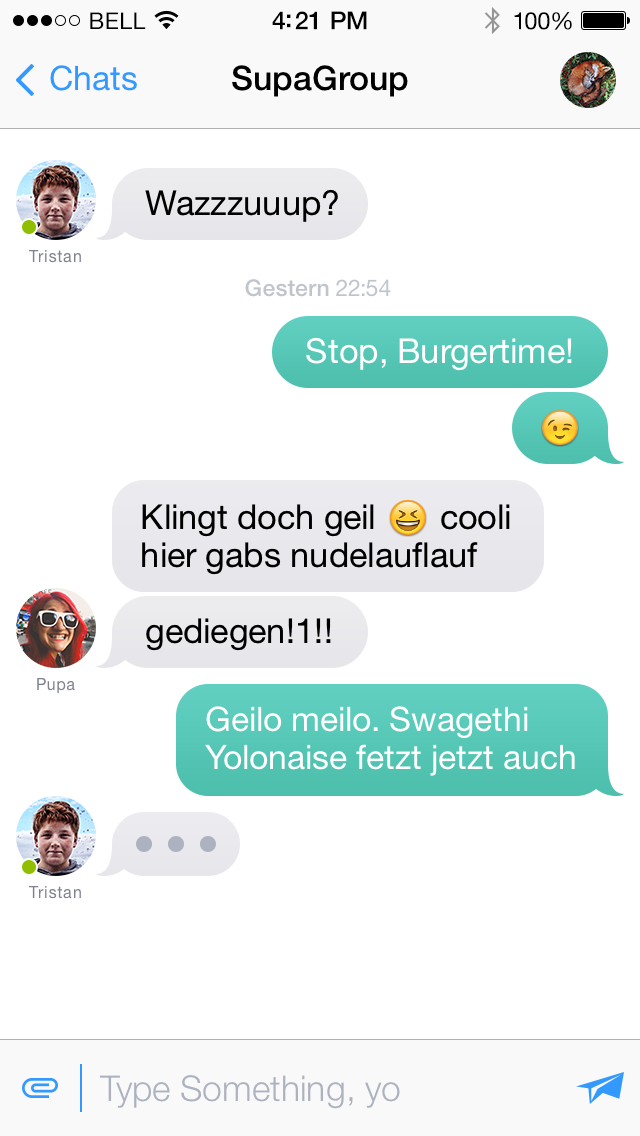
<style>
.page{position:relative;width:640px;height:1136px;background:#ffffff}
.page>*{position:absolute;margin:0}
.t1{font:23px "HelveticaNeue";letter-spacing:0.02em;color:#000000}
.t2{font:25px "HelveticaNeue-Medium";letter-spacing:-0.02em;color:#000000}
.t3{font:24px "HelveticaNeue";letter-spacing:-0.02em;color:#000000}
.t4{font:33.8px "HelveticaNeue";color:#3399ff}
.t5{font:33.8px "HelveticaNeue-Medium";color:#000000}
.t6{font:34.4px "HelveticaNeue";color:#000000}
.t7{font:16px "HelveticaNeue";letter-spacing:0.05em;color:#7e838f}
.t8{font:23.1px "HelveticaNeue-Medium";color:#c0c4cc}
.t9{font:23.1px "HelveticaNeue";color:#c0c4cc}
.t10{font:34.4px "HelveticaNeue";color:#ffffff}
.t11{font:34.4px/38px "HelveticaNeue";color:#000000}
.t12{font:33.8px/37.3px "HelveticaNeue";color:#ffffff}
.t13{font:35.6px "HelveticaNeue-Light";color:#acb2bf}
</style>
<div class="page">
<p class="t1" style="left:90px;top:12px;width:56px;height:17px">BELL</p>
<p class="t2" style="left:272px;top:11px;width:95px;height:19px">4:21 PM</p>
<p class="t3" style="left:514px;top:12px;width:58px;height:18px">100%</p>
<p class="t4" style="left:50px;top:65px;width:87px;height:26px">Chats</p>
<p class="t5" style="left:232px;top:65px;width:176px;height:32px">SupaGroup</p>
<p class="t6" style="left:145px;top:189px;width:193px;height:33px">Wazzzuuup?</p>
<p class="t7" style="left:29px;top:250px;width:52px;height:13px">Tristan</p>
<p class="t8" style="left:245px;top:279px;width:146px;height:18px">Gestern <span class="t9">22:54</span></p>
<p class="t10" style="left:306px;top:337px;width:266px;height:34px">Stop, Burgertime!</p>
<p class="t11" style="left:142px;top:504px;width:368px;height:71px">Klingt doch geil       cooli<br>hier gabs nudelauflauf</p>
<p class="t6" style="left:146px;top:618px;width:185px;height:33px">gediegen!1!!</p>
<p class="t7" style="left:37px;top:678px;width:38px;height:16px">Pupa</p>
<p class="t12" style="left:205px;top:706px;width:370px;height:70px">Geilo meilo. Swagethi<br>Yolonaise fetzt jetzt auch</p>
<p class="t7" style="left:29px;top:886px;width:52px;height:13px">Tristan</p>
<p class="t13" style="left:99px;top:1075px;width:301px;height:34px">Type Something, yo</p>
</div>
